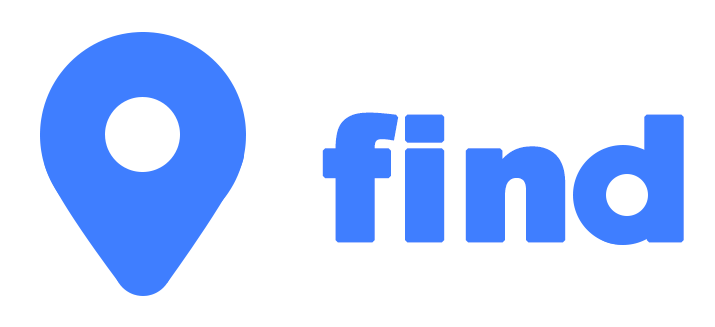
<style>
.page{position:relative;width:715px;height:327px;background:#ffffff}
.page>*{position:absolute;margin:0}
.t1{font:172px "Arial-Black";color:#3f7eff;font-weight:bold}
</style>
<div class="page">
<p class="t1" style="left:322px;top:112px;width:362px;height:133px">find</p>
</div>
